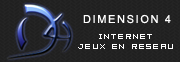
<style>
.page{position:relative;width:180px;height:62px}
.page>*{position:absolute;margin:0}
.t1{font:11px "ArialMT";letter-spacing:0.15em;color:#ffffff}
.t2{font:8px "04b08";letter-spacing:0.15em;color:#ffffff}
</style>
<div class="page">
<p class="t1" style="left:83px;top:14px;width:88px;height:10px">DIMENSION 4</p>
<p class="t2" style="left:78px;top:34px;width:95px;height:15px;text-align:center">Internet<br>Jeux en rESEAU</p>
</div>
